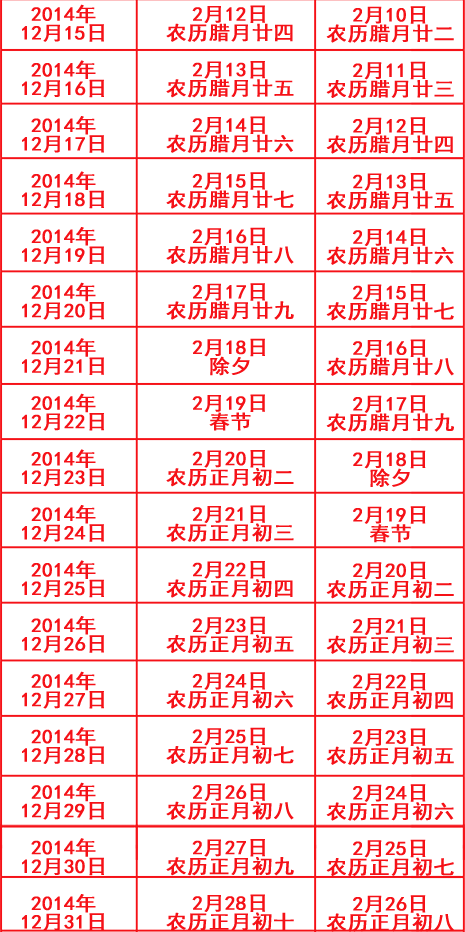
<style>
.page{position:relative;width:465px;height:932px;background:#ffffff}
.page>*{position:absolute;margin:0}
.t1{font:19.8px/18.5px "SimHei";color:#f51117;font-weight:bold;scale:1.06 1}
</style>
<div class="page">
<p class="t1" style="left:22px;top:4px;width:82px;height:927px;text-align:center">2014年<br>12月15日<br><br>2014年<br>12月16日<br><br>2014年<br>12月17日<br><br>2014年<br>12月18日<br><br>2014年<br>12月19日<br><br>2014年<br>12月20日<br><br>2014年<br>12月21日<br><br>2014年<br>12月22日<br><br>2014年<br>12月23日<br><br>2014年<br>12月24日<br><br>2014年<br>12月25日<br><br>2014年<br>12月26日<br><br>2014年<br>12月27日<br><br>2014年<br>12月28日<br><br>2014年<br>12月29日<br><br>2014年<br>12月30日<br><br>2014年<br>12月31日</p>
<p class="t1" style="left:166px;top:5px;width:128px;height:926px;text-align:center">2月12日<br>农历腊月廿四<br><br>2月13日<br>农历腊月廿五<br><br>2月14日<br>农历腊月廿六<br><br>2月15日<br>农历腊月廿七<br><br>2月16日<br>农历腊月廿八<br><br>2月17日<br>农历腊月廿九<br><br>2月18日<br>除夕<br><br>2月19日<br>春节<br><br>2月20日<br>农历正月初二<br><br>2月21日<br>农历正月初三<br><br>2月22日<br>农历正月初四<br><br>2月23日<br>农历正月初五<br><br>2月24日<br>农历正月初六<br><br>2月25日<br>农历正月初七<br><br>2月26日<br>农历正月初八<br><br>2月27日<br>农历正月初九<br><br>2月28日<br>农历正月初十</p>
<p class="t1" style="left:326px;top:6px;width:128px;height:926px;text-align:center">2月10日<br>农历腊月廿二<br><br>2月11日<br>农历腊月廿三<br><br>2月12日<br>农历腊月廿四<br><br>2月13日<br>农历腊月廿五<br><br>2月14日<br>农历腊月廿六<br><br>2月15日<br>农历腊月廿七<br><br>2月16日<br>农历腊月廿八<br><br>2月17日<br>农历腊月廿九<br><br>2月18日<br>除夕<br><br>2月19日<br>春节<br><br>2月20日<br>农历正月初二<br><br>2月21日<br>农历正月初三<br><br>2月22日<br>农历正月初四<br><br>2月23日<br>农历正月初五<br><br>2月24日<br>农历正月初六<br><br>2月25日<br>农历正月初七<br><br>2月26日<br>农历正月初八</p>
</div>
